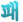
<style>
.page{position:relative;width:23px;height:22px;background:#ffffff}
.page>*{position:absolute;margin:0}
.t1{font:23px "SDKukdetopokki-aLt";letter-spacing:0.06em;font-weight:bold;scale:0.9 1}
</style>
<div class="page">
<p class="t1" style="left:1px;top:0px;width:18px;height:22px">패</p>
</div>
